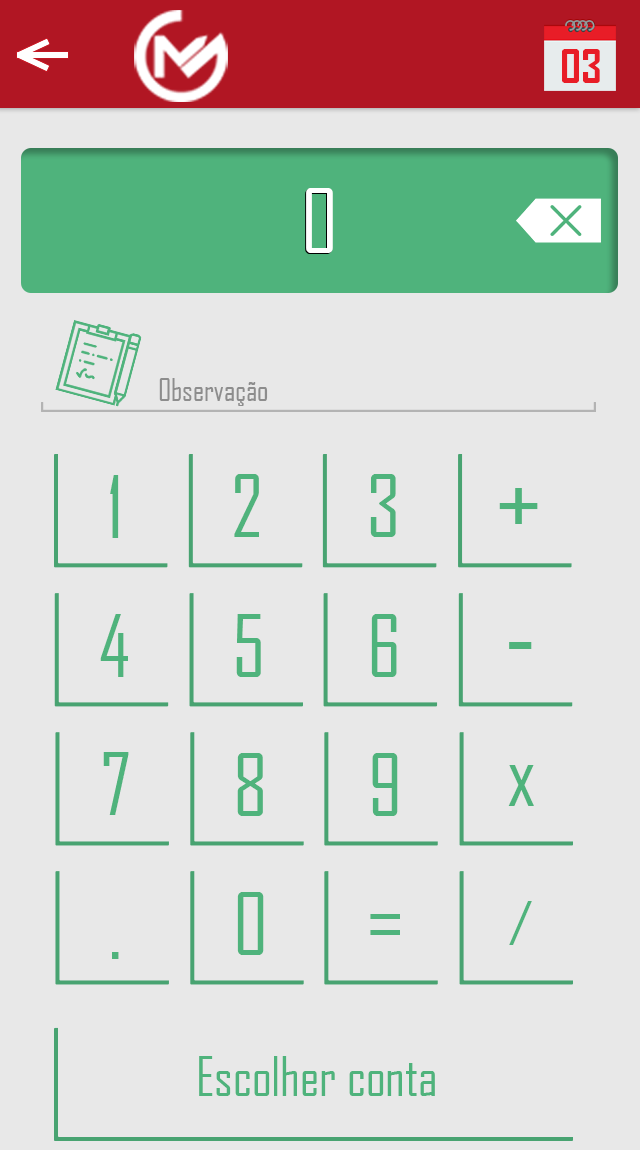
<style>
.page{position:relative;width:640px;height:1150px;background:#e8e8e8}
.page>*{position:absolute;margin:0}
.t1{font:45.3px "AgencyFB-Bold";color:#e81d27}
.t2{font:84.7px "AgencyFB-Reg";color:#ffffff}
.t3{font:29.6px "AgencyFB-Reg";color:#8d8d8d}
.t4{font:81.5px "AgencyFB-Reg";color:#4fb37c}
.t5{font:110.2px "AgencyFB-Reg";color:#4fb37c}
.t6{font:87.3px "AgencyFB-Reg";color:#4fb37c}
.t7{font:58px "AgencyFB-Reg";color:#4fb37c}
.t8{font:51.7px "AgencyFB-Reg";color:#4fb37c}
</style>
<div class="page">
<p class="t1" style="left:562px;top:49px;width:38px;height:34px">03</p>
<p class="t2" style="left:306px;top:188px;width:27px;height:65px">0</p>
<p class="t3" style="left:159px;top:378px;width:109px;height:28px">Observação</p>
<p class="t4" style="left:110px;top:475px;width:9px;height:63px">1</p>
<p class="t4" style="left:234px;top:474px;width:25px;height:63px">2</p>
<p class="t4" style="left:370px;top:474px;width:26px;height:63px">3</p>
<p class="t5" style="left:499px;top:488px;width:39px;height:36px">+</p>
<p class="t4" style="left:100px;top:614px;width:28px;height:63px">4</p>
<p class="t4" style="left:236px;top:614px;width:25px;height:63px">5</p>
<p class="t4" style="left:371px;top:614px;width:26px;height:63px">6</p>
<p class="t5" style="left:509px;top:642px;width:23px;height:7px">-</p>
<p class="t4" style="left:103px;top:752px;width:26px;height:63px">7</p>
<p class="t4" style="left:237px;top:753px;width:26px;height:63px">8</p>
<p class="t4" style="left:372px;top:753px;width:26px;height:63px">9</p>
<p class="t6" style="left:508px;top:765px;width:26px;height:41px">x</p>
<p class="t4" style="left:237px;top:892px;width:27px;height:63px">0</p>
<p class="t7" style="left:509px;top:901px;width:23px;height:44px">/</p>
<p class="t6" style="left:370px;top:914px;width:30px;height:21px">=</p>
<p class="t6" style="left:112px;top:952px;width:7px;height:7px">.</p>
<p class="t8" style="left:199px;top:1056px;width:236px;height:40px">Escolher conta</p>
</div>
